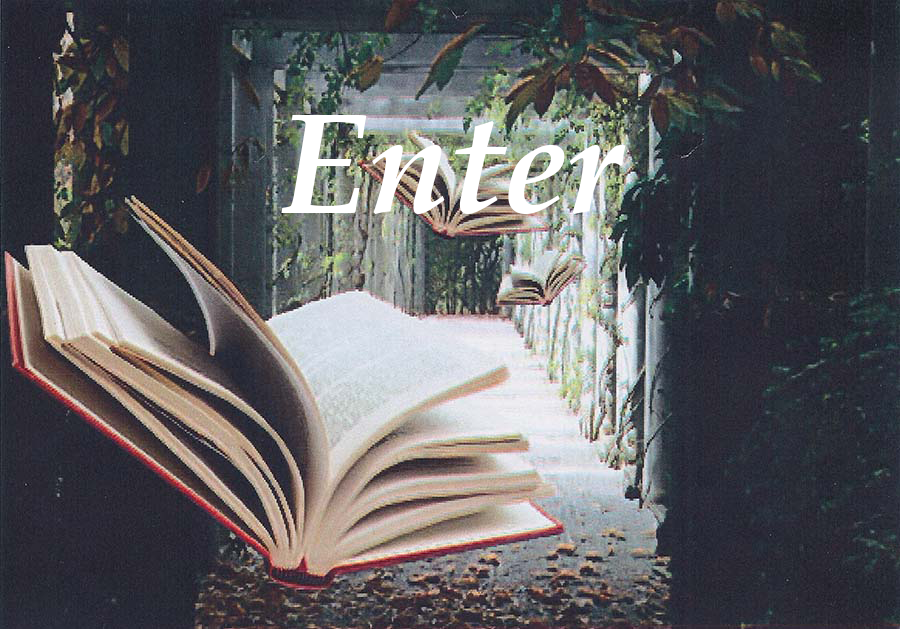
<style>
.page{position:relative;width:900px;height:629px}
.page>*{position:absolute;margin:0}
.t1{font:141.7px "BookAntiqua-BoldItalic";color:#ffffff}
</style>
<div class="page">
<p class="t1" style="left:281px;top:115px;width:345px;height:99px">Enter</p>
</div>
